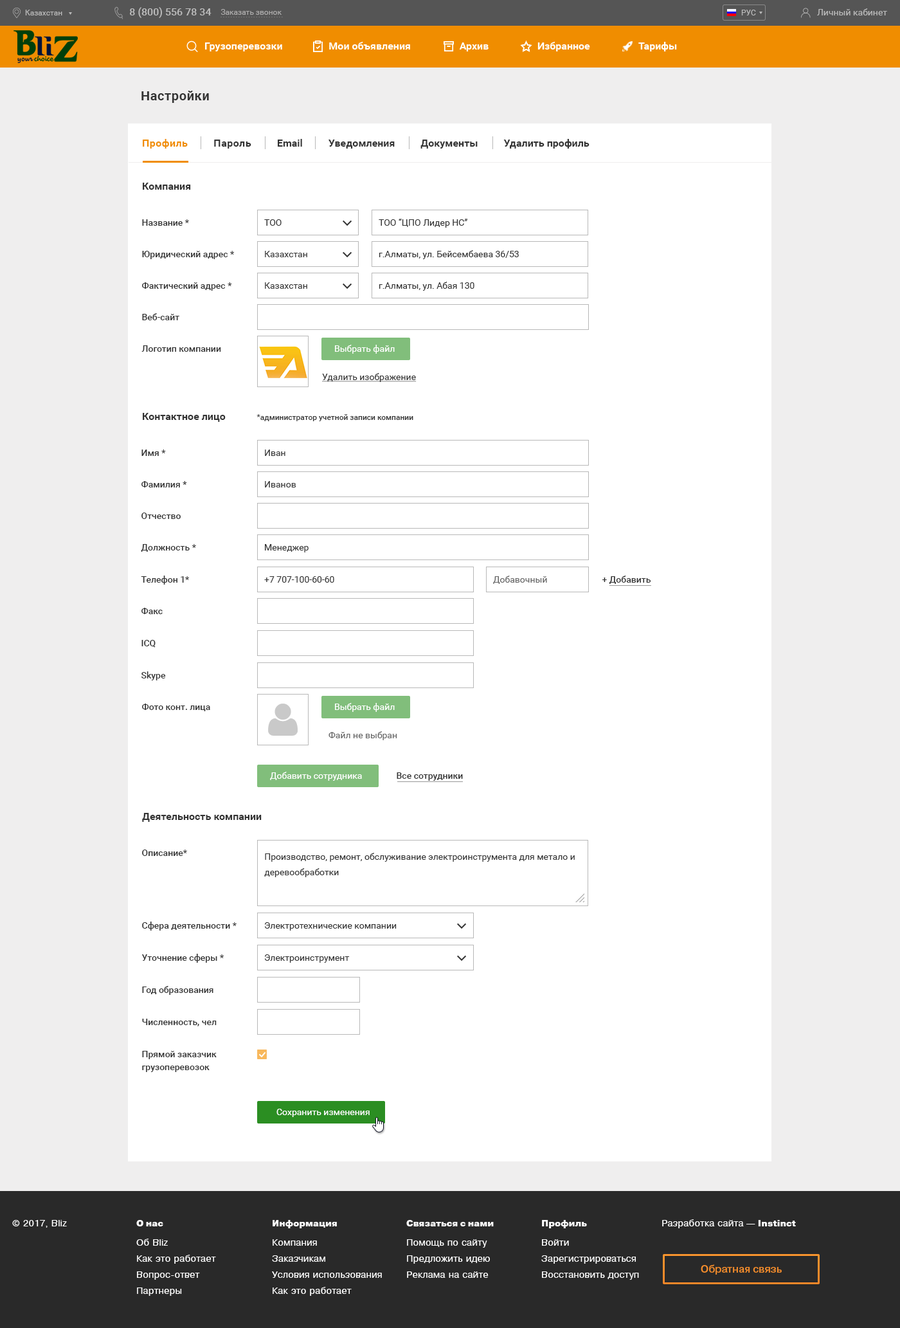
<style>
.page{position:relative;width:900px;height:1328px;background:#ffffff}
.page>*{position:absolute;margin:0}
.t1{font:12.9px "Roboto-Bold";letter-spacing:0.03em;color:#333333}
.t2{font:10.3px "Roboto-Bold";color:#333333}
.t3{font:10.3px "Roboto-Bold";letter-spacing:0.03em;color:#f08d00}
.t4{font:10.3px "Roboto-Bold";letter-spacing:0.03em;color:#333333}
.t5{font:9px "Roboto-Medium";color:#333333}
.t6{font:9px "Roboto-Regular";color:#333333}
.t7{font:9px "Roboto-Regular";color:#ffffff}
.t8{font:9px "Roboto-Regular";color:#333333;text-decoration:underline}
.t9{font:7.7px "Roboto-Medium";color:#333333}
.t10{font:9px "Roboto-Regular";color:#666666}
.t11{font:9px/15.4px "Roboto-Regular";color:#333333}
.t12{font:9px/12.9px "Roboto-Medium";color:#333333}
</style>
<div class="page">
<p class="t1" style="left:141px;top:91px;width:68px;height:12px">Настройки</p>
<p class="t2" style="left:143px;top:139px;width:447px;height:9px"><span class="t3">Профиль          </span><span class="t4">Пароль          </span>Email          Уведомления          Документы          Удалить профиль</p>
<p class="t2" style="left:143px;top:183px;width:48px;height:7px">Компания</p>
<p class="t5" style="left:142px;top:219px;width:47px;height:7px">Название *</p>
<p class="t6" style="left:264px;top:219px;width:18px;height:7px">ТОО</p>
<p class="t6" style="left:379px;top:219px;width:88px;height:9px">ТОО “ЦПО Лидер НС”</p>
<p class="t5" style="left:142px;top:251px;width:92px;height:8px">Юридический адрес *</p>
<p class="t6" style="left:265px;top:251px;width:42px;height:6px">Казахстан</p>
<p class="t6" style="left:379px;top:250px;width:140px;height:9px">г.Алматы, ул. Бейсембаева 36/53</p>
<p class="t6" style="left:379px;top:282px;width:95px;height:9px">г.Алматы, ул. Абая 130</p>
<p class="t5" style="left:142px;top:282px;width:90px;height:9px">Фактический адрес *</p>
<p class="t6" style="left:265px;top:282px;width:42px;height:7px">Казахстан</p>
<p class="t5" style="left:142px;top:313px;width:37px;height:7px">Веб-сайт</p>
<p class="t5" style="left:141px;top:345px;width:80px;height:7px">Логотип компании</p>
<p class="t7" style="left:335px;top:345px;width:60px;height:9px">Выбрать файл</p>
<p class="t8" style="left:322px;top:373px;width:95px;height:9px">Удалить изображение</p>
<p class="t2" style="left:143px;top:413px;width:83px;height:9px">Контактное лицо</p>
<p class="t9" style="left:256px;top:414px;width:157px;height:7px">*администратор учетной записи компании</p>
<p class="t5" style="left:141px;top:449px;width:25px;height:7px">Имя *</p>
<p class="t6" style="left:265px;top:449px;width:20px;height:7px">Иван</p>
<p class="t5" style="left:141px;top:481px;width:46px;height:6px">Фамилия *</p>
<p class="t6" style="left:265px;top:481px;width:31px;height:6px">Иванов</p>
<p class="t5" style="left:141px;top:512px;width:40px;height:7px">Отчество</p>
<p class="t5" style="left:141px;top:544px;width:55px;height:8px">Должность *</p>
<p class="t6" style="left:265px;top:544px;width:44px;height:8px">Менеджер</p>
<p class="t5" style="left:141px;top:575px;width:48px;height:9px">Телефон 1*</p>
<p class="t6" style="left:264px;top:576px;width:70px;height:6px">+7 707-100-60-60</p>
<p class="t10" style="left:493px;top:575px;width:54px;height:9px">Добавочный</p>
<p class="t5" style="left:602px;top:575px;width:49px;height:9px">+ Добавить</p>
<p class="t5" style="left:141px;top:608px;width:22px;height:6px">Факс</p>
<p class="t5" style="left:141px;top:640px;width:15px;height:7px">ICQ</p>
<p class="t5" style="left:141px;top:671px;width:25px;height:9px">Skype</p>
<p class="t5" style="left:142px;top:703px;width:68px;height:8px">Фото конт. лица</p>
<p class="t7" style="left:335px;top:703px;width:60px;height:9px">Выбрать файл</p>
<p class="t10" style="left:328px;top:731px;width:69px;height:9px">Файл не выбран</p>
<p class="t7" style="left:270px;top:771px;width:92px;height:9px">Добавить сотрудника</p>
<p class="t5" style="left:397px;top:772px;width:66px;height:8px">Все сотрудники</p>
<p class="t2" style="left:142px;top:813px;width:120px;height:9px">Деятельность компании</p>
<p class="t5" style="left:142px;top:849px;width:45px;height:7px">Описание*</p>
<p class="t11" style="left:264px;top:852px;width:311px;height:25px">Производство, ремонт, обслуживание электроинструмента для метало и деревообработки</p>
<p class="t5" style="left:142px;top:921px;width:95px;height:9px">Сфера деятельности *</p>
<p class="t6" style="left:264px;top:922px;width:133px;height:8px">Электротехнические компании</p>
<p class="t5" style="left:141px;top:953px;width:83px;height:9px">Уточнение сферы *</p>
<p class="t6" style="left:264px;top:954px;width:86px;height:8px">Электроинструмент</p>
<p class="t5" style="left:142px;top:986px;width:71px;height:9px">Год образования</p>
<p class="t5" style="left:142px;top:1018px;width:75px;height:8px">Численность, чел</p>
<p class="t12" style="left:142px;top:1050px;width:75px;height:22px">Прямой заказчик <br>грузоперевозок</p>
<p class="t7" style="left:276px;top:1108px;width:94px;height:9px">Сохранить изменения</p>
</div>
